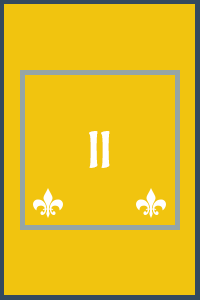
<style>
.page{position:relative;width:200px;height:300px;background:#f1c40f}
.page>*{position:absolute;margin:0}
.t1{font:50.4px "Aladin-Regular";color:#ffffff}
</style>
<div class="page">
<p class="t1" style="left:89px;top:131px;width:21px;height:37px">II</p>
</div>
